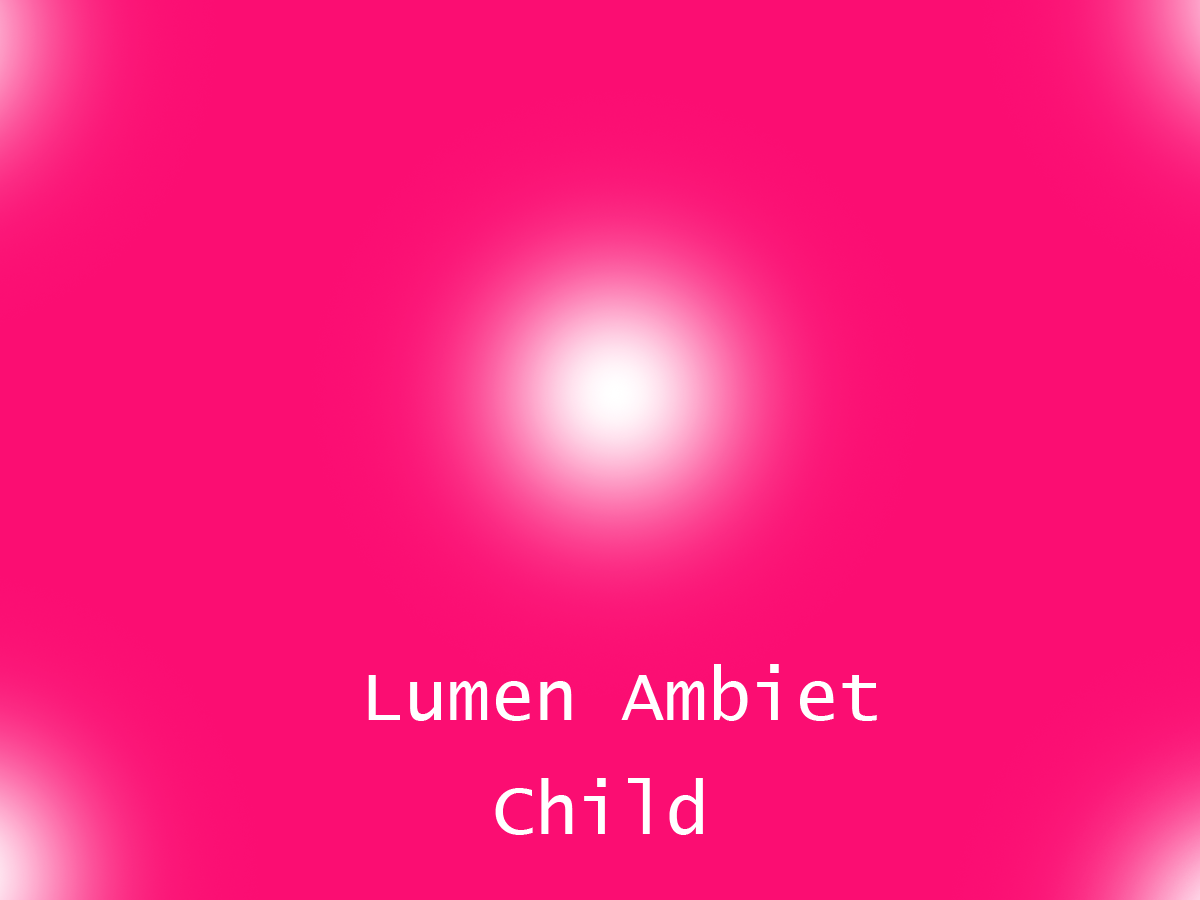
<style>
.page{position:relative;width:1200px;height:900px;background:#fb0d72}
.page>*{position:absolute;margin:0}
.t1{font:72px "LucidaConsole";color:#ffffff}
</style>
<div class="page">
<p class="t1" style="left:368px;top:664px;width:509px;height:57px">Lumen Ambiet</p>
<p class="t1" style="left:495px;top:778px;width:208px;height:57px">Child</p>
</div>
